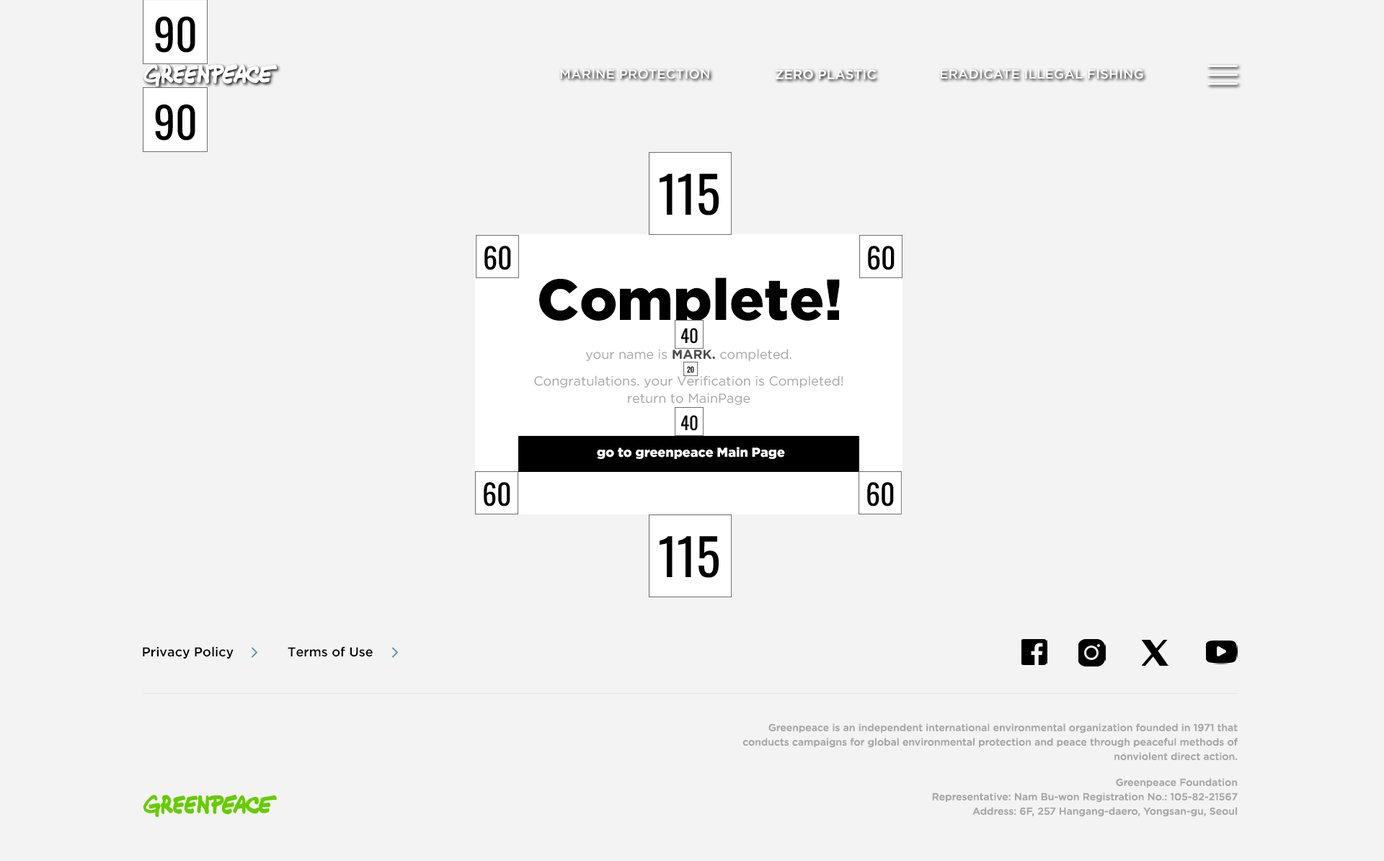
<style>
.page{position:relative;width:1384px;height:861px;background:#f3f3f3}
.page>*{position:absolute;margin:0}
.t1{font:13px "GothamPro-Medium";color:#ffffff;text-transform:uppercase}
.t2{font:57.7px "GothamPro-Black";color:#000000}
.t3{font:13px "GothamPro";color:#a6a6a6}
.t4{font:13px "GothamPro-Bold";color:#4c4c4c}
.t5{font:13px/17.3px "GothamPro";color:#a6a6a6}
.t6{font:13px "GothamPro-Black";color:#ffffff}
.t7{font:13px "GothamPro-Medium";color:#000000}
.t8{font:10.1px/14.4px "GothamPro-Medium";color:#a6a6a6}
</style>
<div class="page">
<p class="t1" style="left:560px;top:69px;width:149px;height:10px">Marine protection</p>
<p class="t1" style="left:775px;top:69px;width:102px;height:10px">Zero plastic</p>
<p class="t1" style="left:940px;top:69px;width:203px;height:10px">Eradicate illegal fishing</p>
<p class="t2" style="left:539px;top:278px;width:301px;height:51px">Complete!</p>
<p class="t3" style="left:585px;top:349px;width:207px;height:13px">your name is <span class="t4">MARK.</span> completed.</p>
<p class="t5" style="left:534px;top:376px;width:309px;height:30px;text-align:center">Congratulations. your Verification is Completed!<br>return to MainPage</p>
<p class="t6" style="left:597px;top:447px;width:188px;height:12px">go to greenpeace Main Page</p>
<p class="t7" style="left:143px;top:647px;width:91px;height:12px">Privacy Policy</p>
<p class="t7" style="left:288px;top:647px;width:85px;height:10px">Terms of Use</p>
<p class="t8" style="left:743px;top:724px;width:495px;height:37px;text-align:right">Greenpeace is an independent international environmental organization founded in 1971 that conducts campaigns for global environmental protection and peace through peaceful methods of nonviolent direct action.</p>
<p class="t8" style="left:932px;top:779px;width:306px;height:39px;text-align:right">Greenpeace Foundation<br>Representative: Nam Bu-won Registration No.: 105-82-21567<br>Address: 6F, 257 Hangang-daero, Yongsan-gu, Seoul</p>
</div>
